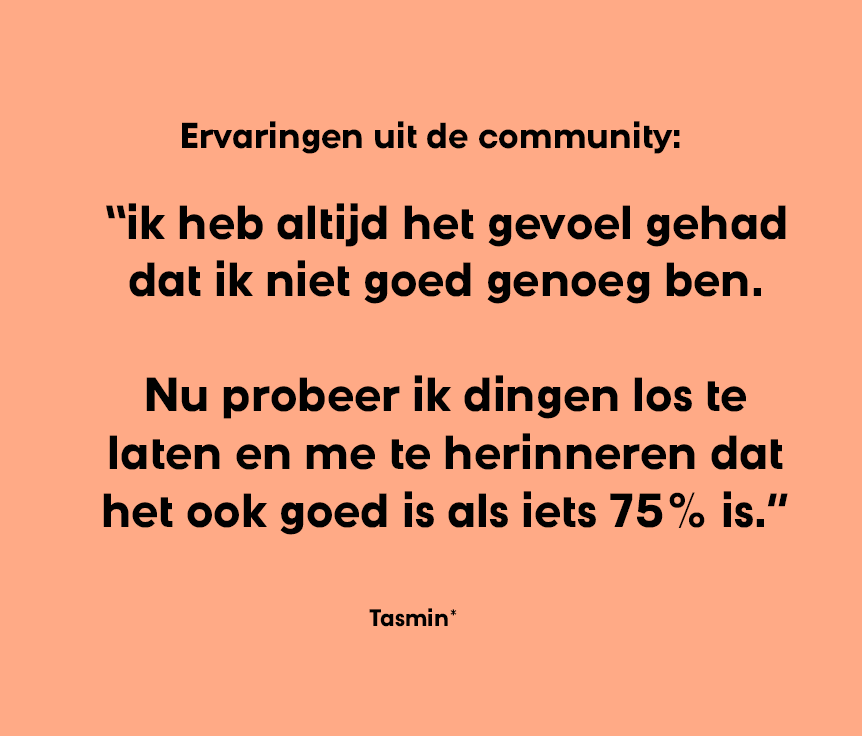
<style>
.page{position:relative;width:862px;height:736px;background:#ffaa86}
.page>*{position:absolute;margin:0}
.t1{font:36px "DNpro-Bold";color:#000000}
.t2{font:48px "DNpro-Bold";color:#010101}
.t3{font:24px "DNpro-Bold";color:#000000}
</style>
<div class="page">
<p class="t1" style="left:182px;top:121px;width:498px;height:33px">Ervaringen uit de community:</p>
<p class="t2" style="left:103px;top:203px;width:685px;height:332px;text-align:center">“ik heb altijd het gevoel gehad<br>dat ik niet goed genoeg ben.<br><br>Nu probeer ik dingen los te<br>laten en me te herinneren dat<br>het ook goed is als iets 75% is.”</p>
<p class="t3" style="left:369px;top:608px;width:88px;height:19px">Tasmin*</p>
</div>
